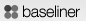
<style>
.page{position:relative;width:86px;height:21px}
.page>*{position:absolute;margin:0}
.t1{font:16px "BdENeueHelvetica-Lt";letter-spacing:-0.025em;color:#000000}
</style>
<div class="page">
<p class="t1" style="left:23px;top:5px;width:57px;height:13px">baseliner</p>
</div>
